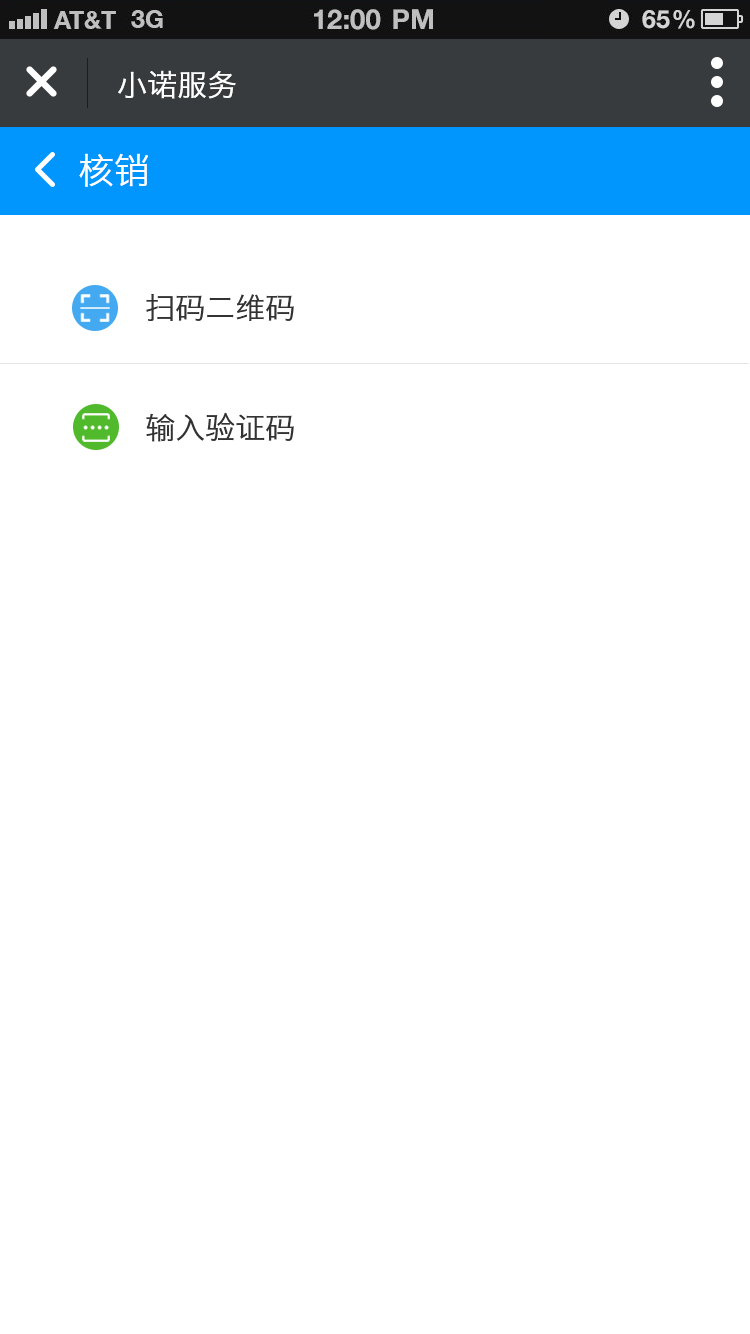
<style>
.page{position:relative;width:750px;height:1334px;background:#ffffff}
.page>*{position:absolute;margin:0}
.t1{font:30px "HiraginoSansGB-W3";color:#ffffff}
.t2{font:36px "HiraginoSansGB-W3";color:#ffffff}
.t3{font:30px/60px "HiraginoSansGB-W3";color:#333333}
</style>
<div class="page">
<p class="t1" style="left:118px;top:70px;width:118px;height:29px">小诺服务</p>
<p class="t2" style="left:79px;top:153px;width:69px;height:34px">核销</p>
<p class="t3" style="left:146px;top:294px;width:148px;height:148px">扫码二维码<br><br>输入验证码</p>
</div>
